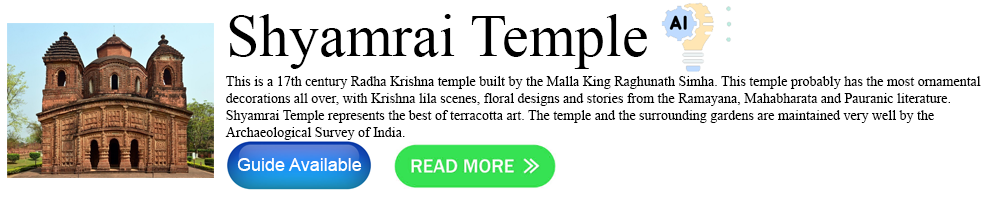
<style>
.page{position:relative;width:1000px;height:200px;background:#ffffff}
.page>*{position:absolute;margin:0}
.t1{font:60px "TimesNewRomanPSMT";color:#000000}
.t2{font:14px "TimesNewRomanPSMT";color:#000000}
.t3{font:18px "ArialMT";color:#ffffff}
</style>
<div class="page">
<p class="t1" style="left:229px;top:14px;width:418px;height:55px">Shyamrai Temple</p>
<p class="t2" style="left:225px;top:76px;width:756px;height:64px">This is a 17th century Radha Krishna temple built by the Malla King Raghunath Simha. This temple probably has the most ornamental decorations all over, with Krishna lila scenes, floral designs and stories from the Ramayana, Mahabharata and Pauranic literature. Shyamrai Temple represents the best of terracotta art. The temple and the surrounding gardens are maintained very well by the Archaeological Survey of India.</p>
<p class="t3" style="left:237px;top:158px;width:125px;height:13px">Guide Available</p>
</div>
